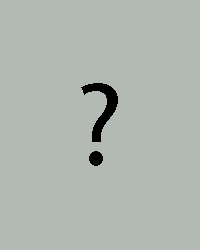
<style>
.page{position:relative;width:200px;height:250px;background:#b3bab4}
.page>*{position:absolute;margin:0}
.t1{font:120px "MyriadPro-Regular";color:#000000}
</style>
<div class="page">
<p class="t1" style="left:81px;top:83px;width:37px;height:83px">?</p>
</div>
